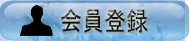
<style>
.page{position:relative;width:190px;height:41px}
.page>*{position:absolute;margin:0}
.t1{font:26.1px "MS-Gothic";color:#121826;scale:0.84 1}
</style>
<div class="page">
<p class="t1" style="left:61px;top:9px;width:87px;height:24px">会員登録</p>
</div>
